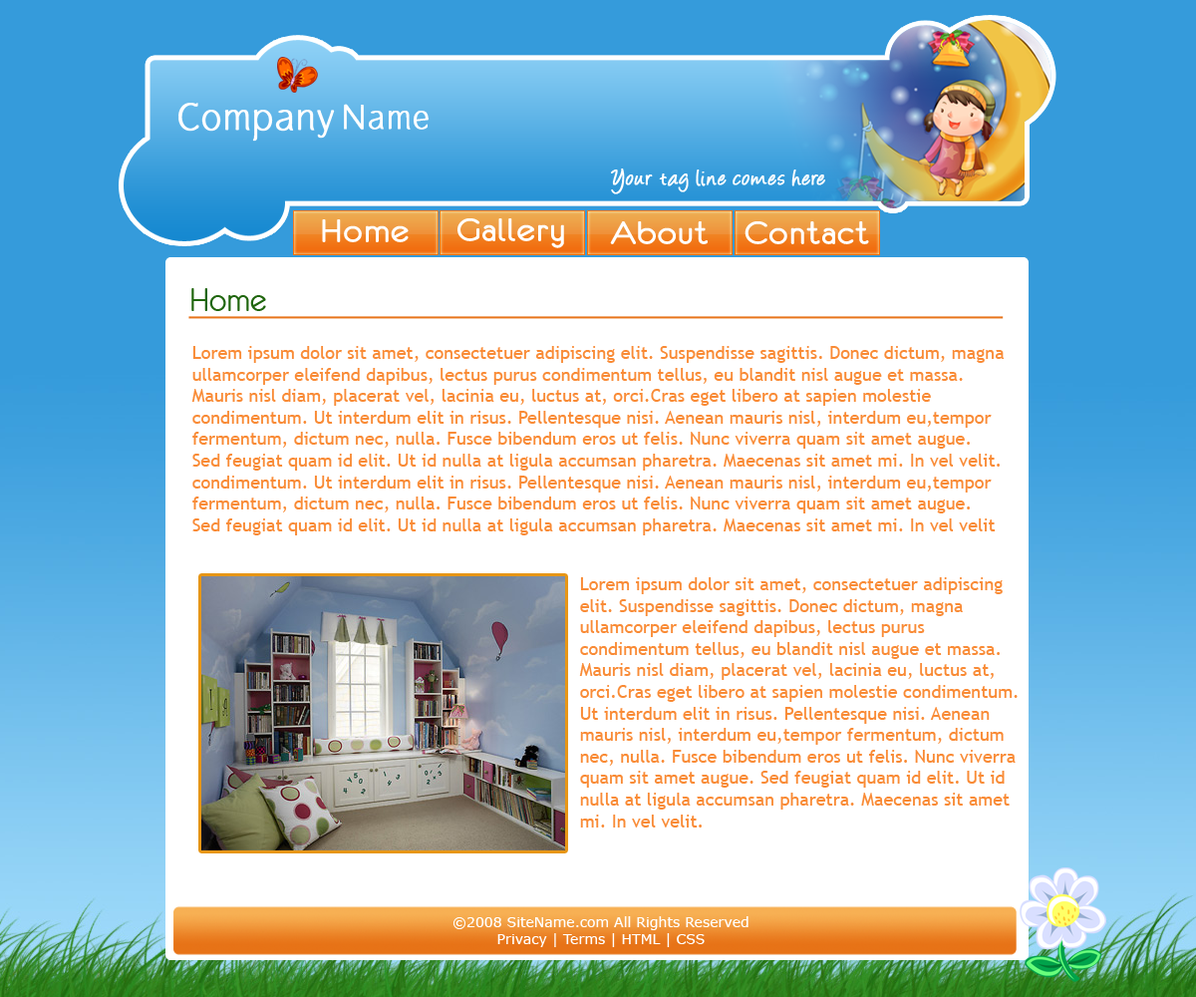
<style>
.page{position:relative;width:1196px;height:997px;background:#ffffff}
.page>*{position:absolute;margin:0}
.t1{font:39.9px "GauntletThin";color:#fffefe;font-weight:bold}
.t2{font:35.9px "GauntletThin";color:#fefefe;font-weight:bold}
.t3{font:24.9px "Angelina";color:#ffffff;font-weight:bold}
.t4{font:35.9px "Eurofurenceregular";color:#ffffff;font-weight:bold;scale:1.1 1}
.t5{font:35.9px "Eurofurenceregular";color:#20660e}
.t6{font:17.9px "TrebuchetMS";color:#f98b36}
.t7{font:14px "Verdana";color:#ffffff}
</style>
<div class="page">
<p class="t1" style="left:178px;top:103px;width:157px;height:39px">Company</p>
<p class="t2" style="left:344px;top:104px;width:85px;height:26px">Name</p>
<p class="t3" style="left:611px;top:168px;width:214px;height:26px">Your tag line comes here</p>
<p class="t4" style="left:322px;top:219px;width:87px;height:23px">Home</p>
<p class="t4" style="left:458px;top:218px;width:106px;height:30px">Gallery</p>
<p class="t4" style="left:610px;top:221px;width:98px;height:23px">About</p>
<p class="t4" style="left:745px;top:221px;width:124px;height:23px">Contact</p>
<p class="t5" style="left:191px;top:288px;width:75px;height:23px">Home</p>
<p class="t6" style="left:191px;top:346px;width:814px;height:189px">Lorem ipsum dolor sit amet, consectetuer adipiscing elit. Suspendisse sagittis. Donec dictum, magna<br>ullamcorper eleifend dapibus, lectus purus condimentum tellus, eu blandit nisl augue et massa.<br>Mauris nisl diam, placerat vel, lacinia eu, luctus at, orci.Cras eget libero at sapien molestie<br>condimentum. Ut interdum elit in risus. Pellentesque nisi. Aenean mauris nisl, interdum eu,tempor<br>fermentum, dictum nec, nulla. Fusce bibendum eros ut felis. Nunc viverra quam sit amet augue.<br>Sed feugiat quam id elit. Ut id nulla at ligula accumsan pharetra. Maecenas sit amet mi. In vel velit.<br>condimentum. Ut interdum elit in risus. Pellentesque nisi. Aenean mauris nisl, interdum eu,tempor<br>fermentum, dictum nec, nulla. Fusce bibendum eros ut felis. Nunc viverra quam sit amet augue.<br>Sed feugiat quam id elit. Ut id nulla at ligula accumsan pharetra. Maecenas sit amet mi. In vel velit</p>
<p class="t6" style="left:579px;top:577px;width:439px;height:250px">Lorem ipsum dolor sit amet, consectetuer adipiscing<br>elit. Suspendisse sagittis. Donec dictum, magna<br>ullamcorper eleifend dapibus, lectus purus<br>condimentum tellus, eu blandit nisl augue et massa.<br>Mauris nisl diam, placerat vel, lacinia eu, luctus at,<br>orci.Cras eget libero at sapien molestie condimentum.<br>Ut interdum elit in risus. Pellentesque nisi. Aenean<br>mauris nisl, interdum eu,tempor fermentum, dictum<br>nec, nulla. Fusce bibendum eros ut felis. Nunc viverra<br>quam sit amet augue. Sed feugiat quam id elit. Ut id<br>nulla at ligula accumsan pharetra. Maecenas sit amet<br>mi. In vel velit.</p>
<p class="t7" style="left:454px;top:916px;width:295px;height:31px;text-align:center">©2008 SiteName.com All Rights Reserved<br>Privacy | Terms | HTML | CSS</p>
</div>
